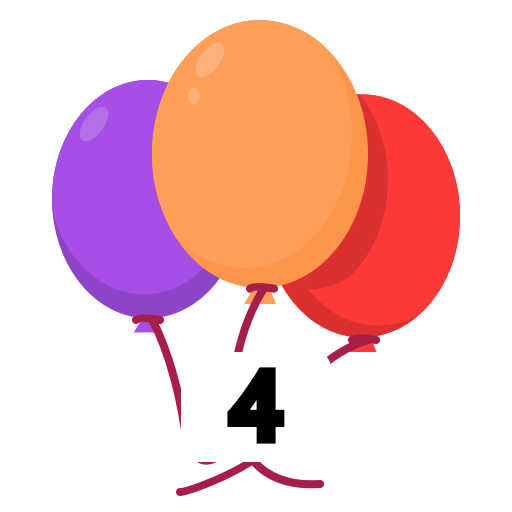
<style>
.page{position:relative;width:512px;height:512px;background:#ffffff}
.page>*{position:absolute;margin:0}
.t1{font:116.4px "Sen-ExtraBold";letter-spacing:-0.075em;color:#000000}
</style>
<div class="page">
<p class="t1" style="left:227px;top:367px;width:58px;height:77px">4</p>
</div>
